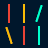
<style>
.page{position:relative;width:48px;height:48px;background:#00172c}
.page>*{position:absolute;margin:0}
.t1{font:18px "SpaceMono-Regular";color:#00ffcc}
.t2{font:18px "SpaceMono-Regular";color:#fabb05}
</style>
<div class="page">
<p class="t1" style="left:35px;top:5px;width:8px;height:17px">/</p>
<p class="t2" style="left:5px;top:27px;width:8px;height:17px">\</p>
</div>
